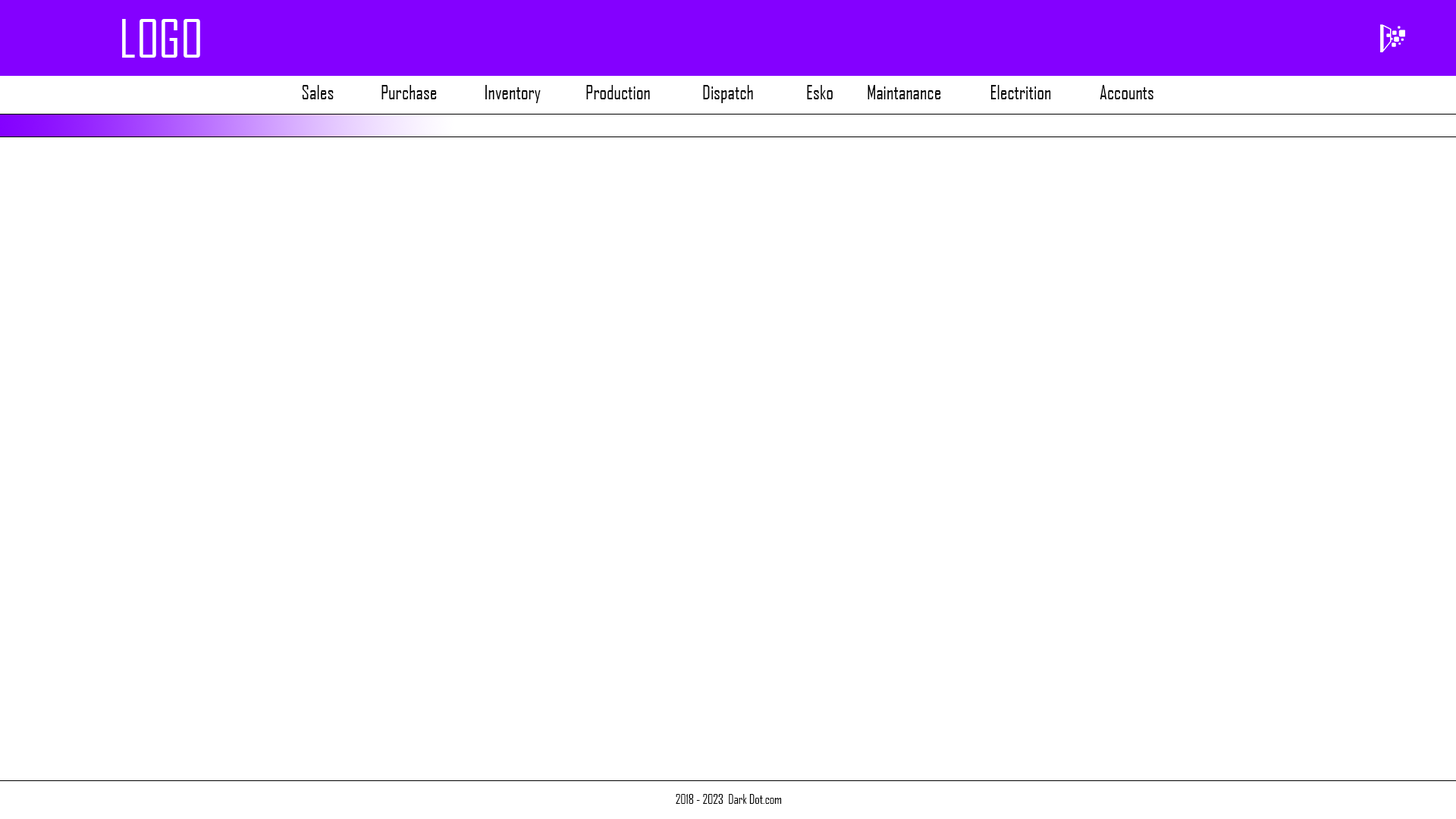
<style>
.page{position:relative;width:1456px;height:819px;background:#ffffff}
.page>*{position:absolute;margin:0}
.t1{font:50.6px "AgencyFB-Reg";color:#ffffff}
.t2{font:19px "AgencyFB-Reg";color:#000000}
.t3{font:12.6px "AgencyFB-Reg";color:#000000}
</style>
<div class="page">
<p class="t1" style="left:122px;top:19px;width:78px;height:39px">LOGO</p>
<p class="t2" style="left:302px;top:85px;width:32px;height:14px">Sales</p>
<p class="t2" style="left:381px;top:85px;width:56px;height:14px">Purchase</p>
<p class="t2" style="left:485px;top:85px;width:56px;height:18px">Inventory</p>
<p class="t2" style="left:586px;top:85px;width:64px;height:14px">Production</p>
<p class="t2" style="left:703px;top:85px;width:50px;height:18px">Dispatch</p>
<p class="t2" style="left:807px;top:85px;width:26px;height:14px">Esko</p>
<p class="t2" style="left:868px;top:85px;width:73px;height:14px">Maintanance</p>
<p class="t2" style="left:990px;top:85px;width:61px;height:14px">Electrition</p>
<p class="t2" style="left:1100px;top:85px;width:53px;height:14px">Accounts</p>
<p class="t3" style="left:676px;top:794px;width:106px;height:10px">2018 - 2023  Dark Dot.com</p>
</div>
